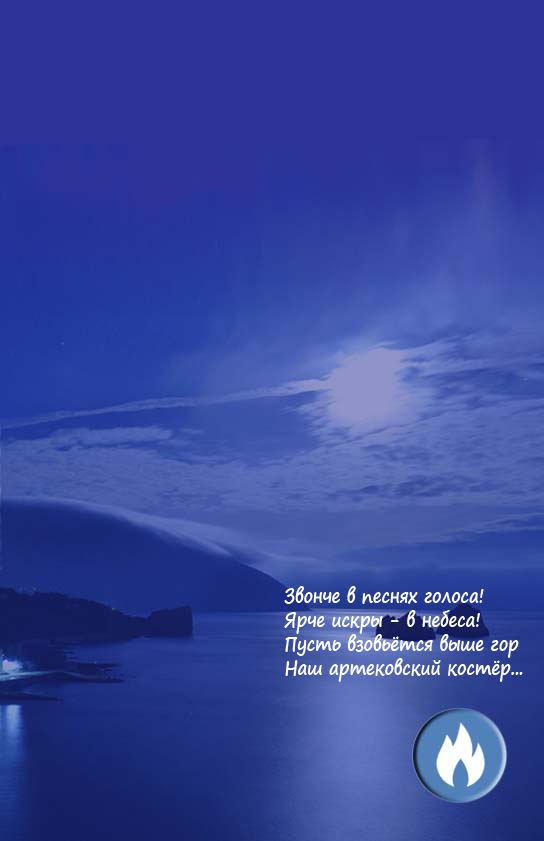
<style>
.page{position:relative;width:544px;height:841px}
.page>*{position:absolute;margin:0}
.t1{font:20.1px "SegoePrint-Bold";color:#ffffff;scale:0.83 1}
</style>
<div class="page">
<p class="t1" style="left:284px;top:586px;width:239px;height:96px">Звонче в песнях голоса!<br>Ярче искры - в небеса!<br>Пусть взовьётся выше гор<br>Наш артековский костёр...</p>
</div>
